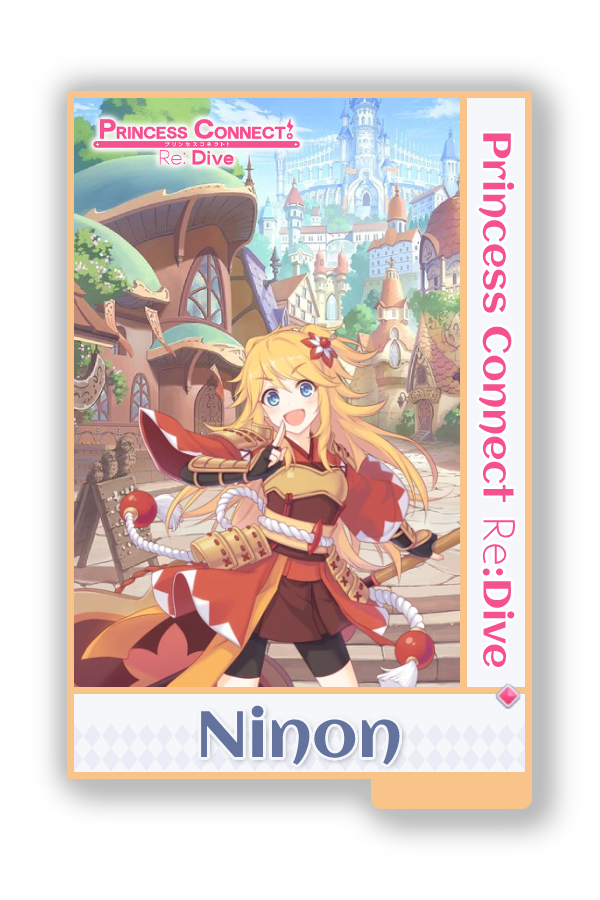
<style>
.page{position:relative;width:600px;height:900px;background:#ffffff}
.page>*{position:absolute;margin:0}
.t1{font:39px "Aclonica-Regular";color:#f55191}
.t2{font:39px "AaarghNormal";color:#f55191}
.t3{font:65px "Aclonica-Regular";color:#64739d}
</style>
<div class="page">
<p class="t1" style="left:478px;top:133px;width:38px;height:534px;rotate:90deg">Princess Connect <span class="t2">Re</span>:Dive</p>
<p class="t3" style="left:201px;top:705px;width:199px;height:60px">Ninon</p>
</div>
